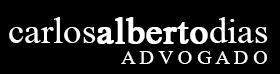
<style>
.page{position:relative;width:280px;height:74px;background:#000000}
.page>*{position:absolute;margin:0}
.t1{font:55px "Microsoft-Himalaya";color:#ffffff;font-weight:bold}
.t2{font:55px "Microsoft-Himalaya";color:#ffffff}
.t3{font:20px "MongolianBaiti";color:#ffffff}
</style>
<div class="page">
<p class="t1" style="left:9px;top:17px;width:259px;height:27px"><span class="t2">carlos</span>alberto<span class="t2">dias</span></p>
<p class="t3" style="left:121px;top:51px;width:146px;height:13px">A D V O G A D O</p>
</div>
